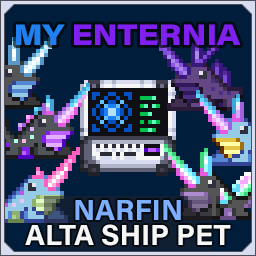
<style>
.page{position:relative;width:256px;height:256px;background:#001e3b}
.page>*{position:absolute;margin:0}
.t1{font:29.2px "AcuminConcept_760.000wght_112.000wdth";color:#8020f0}
.t2{font:29.2px "AcuminConcept_760.000wght_112.000wdth";color:#2080f0}
.t3{font:29.2px/25px "AcuminConcept-Bold";color:#f6f6f6}
.t4{font:29.2px/25px "AcuminConcept-Bold";color:#7eafff}
</style>
<div class="page">
<p class="t1" style="left:16px;top:24px;width:225px;height:21px"><span class="t2">MY </span>ENTERNIA</p>
<p class="t3" style="left:25px;top:200px;width:206px;height:46px;text-align:center"><span class="t4">NARFIN<br></span>ALTA SHIP PET</p>
</div>
